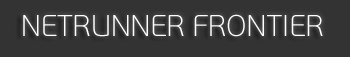
<style>
.page{position:relative;width:350px;height:57px;background:#333333}
.page>*{position:absolute;margin:0}
.t1{font:30px "PFBeauSansPro-Thin";color:#ffffff}
</style>
<div class="page">
<p class="t1" style="left:23px;top:14px;width:300px;height:23px">NETRUNNER FRONTIER</p>
</div>
